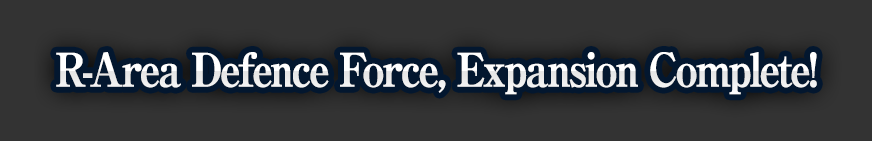
<style>
.page{position:relative;width:872px;height:141px;background:#333333}
.page>*{position:absolute;margin:0}
.t1{font:46px "RyuminPro-ExBold";letter-spacing:-0.08em;color:#ffffff;font-weight:bold;scale:0.9 1}
</style>
<div class="page">
<p class="t1" style="left:56px;top:52px;width:761px;height:43px">R-Area Defence Force, Expansion Complete!</p>
</div>
